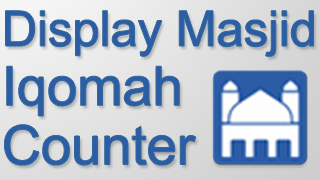
<style>
.page{position:relative;width:320px;height:180px}
.page>*{position:absolute;margin:0}
.t1{font:48.9px/53.3px "ArialMT";color:#2b5da7}
.t2{font:54.3px/59.2px "ArialMT";color:#2b5da7}
</style>
<div class="page">
<p class="t1" style="left:4px;top:10px;width:310px;height:155px">Display Masjid<br><span class="t2">Iqomah<br>Counter</span></p>
</div>
